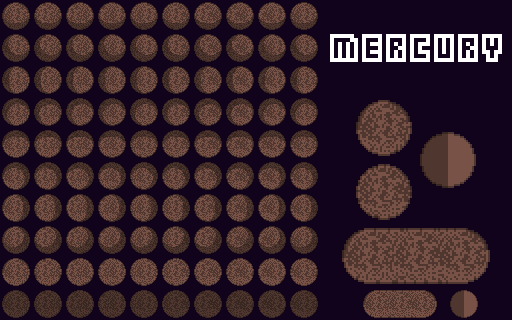
<style>
.page{position:relative;width:512px;height:320px;background:#12031d}
.page>*{position:absolute;margin:0}
.t1{font:32px "KenPixel-Blocks";color:#ffffff}
</style>
<div class="page">
<p class="t1" style="left:330px;top:34px;width:172px;height:28px">Mercury</p>
</div>
